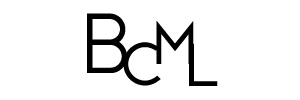
<style>
.page{position:relative;width:300px;height:100px;background:#ffffff}
.page>*{position:absolute;margin:0}
.t1{font:90px "NEOTERIC-Bold";color:#000000}
.t2{font:80px "NEOTERIC-Bold";color:#000000}
</style>
<div class="page">
<p class="t1" style="left:87px;top:13px;width:40px;height:60px">B</p>
<p class="t2" style="left:156px;top:20px;width:38px;height:44px">m</p>
<p class="t2" style="left:123px;top:42px;width:38px;height:44px">c</p>
<p class="t2" style="left:189px;top:43px;width:29px;height:43px">l</p>
</div>
